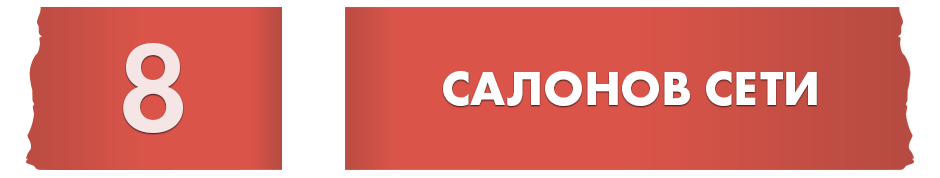
<style>
.page{position:relative;width:940px;height:178px;background:#da5449}
.page>*{position:absolute;margin:0}
.t1{font:128.4px "FuturaPT-Demi";color:#f5e6e5;text-transform:uppercase}
.t2{font:49.9px "FuturaPT-Bold";color:#ffffff;text-transform:uppercase}
</style>
<div class="page">
<p class="t1" style="left:123px;top:43px;width:60px;height:90px;rotate:180deg">8</p>
<p class="t2" style="left:443px;top:71px;width:374px;height:35px">Салонов сети</p>
</div>
